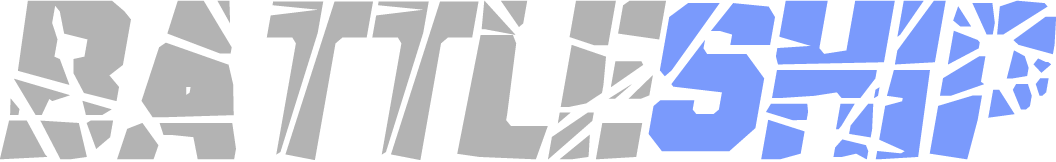
<style>
.page{position:relative;width:1056px;height:162px;background:#ffffff}
.page>*{position:absolute;margin:0}
.t1{font:158.4px "Brad";color:#b3b3b3;font-style:italic}
.t2{font:158.4px "Brad";color:#7a9afc;font-style:italic}
</style>
<div class="page">
<p class="t1" style="left:0px;top:0px;width:1057px;height:160px">Battle<span class="t2">Ship</span></p>
</div>
